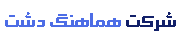
<style>
.page{position:relative;width:181px;height:40px;background:#ffffff}
.page>*{position:absolute;margin:0}
.t1{font:18px "2--SinaBold";color:#4d6de6}
.t2{font:18px "2--SinaBold";color:#122069}
</style>
<div class="page">
<p class="t1" style="left:5px;top:12px;width:171px;height:19px"><span class="t2">شرکت </span>هماهنگ دشت</p>
</div>
